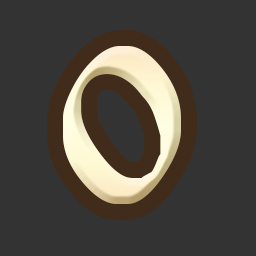
<style>
.page{position:relative;width:256px;height:256px;background:#333333}
.page>*{position:absolute;margin:0}
.t1{font:158px "PerryGothic";color:#fdf1ce;scale:0.97 1}
</style>
<div class="page">
<p class="t1" style="left:63px;top:46px;width:118px;height:158px">0</p>
</div>
